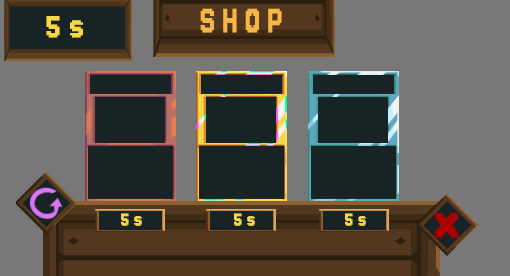
<style>
.page{position:relative;width:510px;height:276px;background:#787878}
.page>*{position:absolute;margin:0}
.t1{font:39.4px "Jersey10-Regular";letter-spacing:0.003em;color:#f7d745}
.t2{font:43.9px "Jersey10-Regular";letter-spacing:0.003em;color:#f7b645;scale:0.79 1}
.t3{font:22.4px "Jersey10-Regular";letter-spacing:0.003em;color:#f7d745}
</style>
<div class="page">
<p class="t1" style="left:46px;top:16px;width:37px;height:22px">5 s</p>
<p class="t2" style="left:200px;top:8px;width:82px;height:25px">S H O P</p>
<p class="t3" style="left:121px;top:213px;width:21px;height:13px">5 s</p>
<p class="t3" style="left:234px;top:213px;width:21px;height:13px">5 s</p>
<p class="t3" style="left:345px;top:213px;width:21px;height:13px">5 s</p>
</div>
